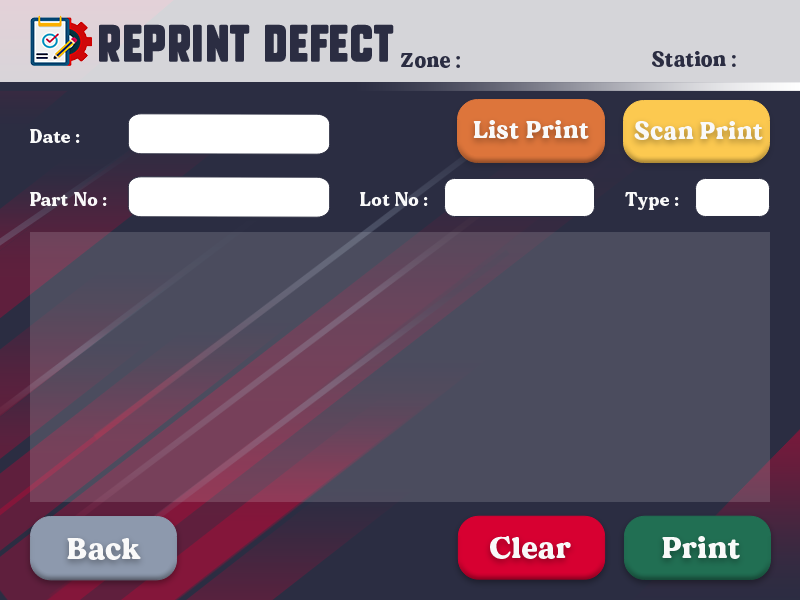
<style>
.page{position:relative;width:800px;height:600px;background:#4b4c5e}
.page>*{position:absolute;margin:0}
.t1{font:36px "SubtleCurves";letter-spacing:0.025em;color:#2b2d42}
.t2{font:20px "MADEDillan";letter-spacing:0.025em;color:#2b2d42}
.t3{font:24px "MADEDillan";letter-spacing:0.025em;color:#f9f9f9}
.t4{font:18px "MADEDillan";letter-spacing:0.025em;color:#f9f9f9}
.t5{font:30px "MADEDillan";letter-spacing:0.025em;color:#f9f9f9}
</style>
<div class="page">
<p class="t1" style="left:99px;top:24px;width:295px;height:38px">Reprint Defect</p>
<p class="t2" style="left:401px;top:53px;width:59px;height:15px">Zone :</p>
<p class="t2" style="left:652px;top:51px;width:84px;height:16px">Station :</p>
<p class="t3" style="left:473px;top:120px;width:116px;height:19px">List Print</p>
<p class="t3" style="left:634px;top:121px;width:129px;height:19px">Scan Print</p>
<p class="t4" style="left:30px;top:129px;width:50px;height:14px">Date :</p>
<p class="t4" style="left:30px;top:192px;width:77px;height:14px">Part No :</p>
<p class="t4" style="left:360px;top:192px;width:68px;height:14px">Lot No :</p>
<p class="t4" style="left:625px;top:192px;width:54px;height:18px">Type :</p>
<p class="t5" style="left:67px;top:538px;width:74px;height:22px">Back</p>
<p class="t5" style="left:490px;top:536px;width:81px;height:23px">Clear</p>
<p class="t5" style="left:662px;top:536px;width:78px;height:23px">Print</p>
</div>
